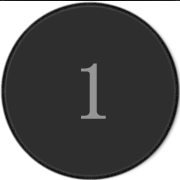
<style>
.page{position:relative;width:180px;height:180px;background:#2e2e2e}
.page>*{position:absolute;margin:0}
.t1{font:80px "YouYuan";color:#969696;font-weight:bold}
</style>
<div class="page">
<p class="t1" style="left:81px;top:62px;width:25px;height:56px">1</p>
</div>
